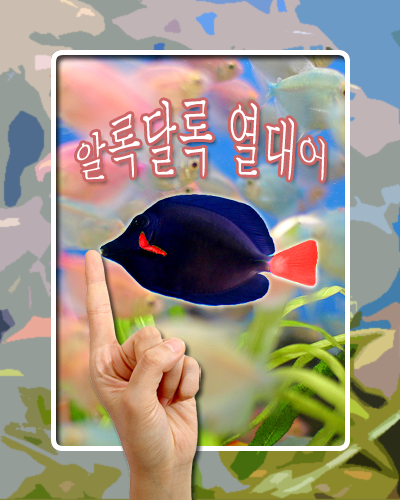
<style>
.page{position:relative;width:400px;height:500px}
.page>*{position:absolute;margin:0}
.t1{font:35px "Batang";color:#ffffff}
</style>
<div class="page">
<p class="t1" style="left:77px;top:100px;width:248px;height:81px;text-align:center">알록달록 열대어</p>
</div>
